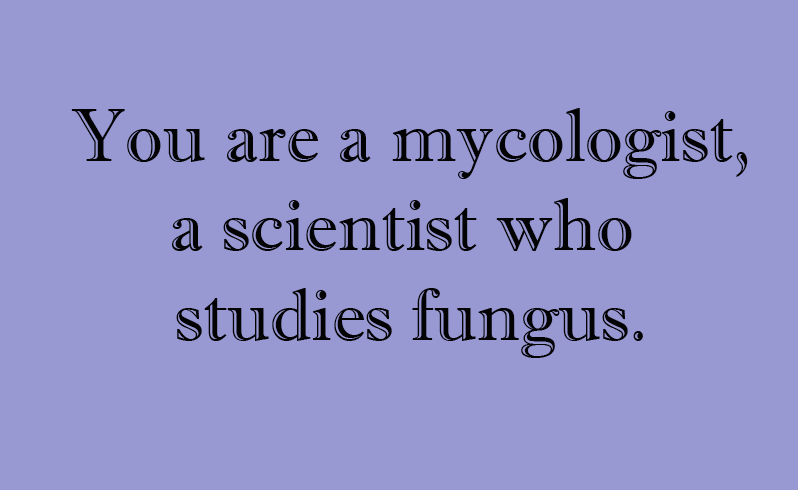
<style>
.page{position:relative;width:798px;height:490px;background:#9898d3}
.page>*{position:absolute;margin:0}
.t1{font:74.8px "ImprintMT-Shadow";color:#030303}
</style>
<div class="page">
<p class="t1" style="left:71px;top:108px;width:677px;height:250px;text-align:center">You are a mycologist,<br>a scientist who <br>studies fungus.</p>
</div>
